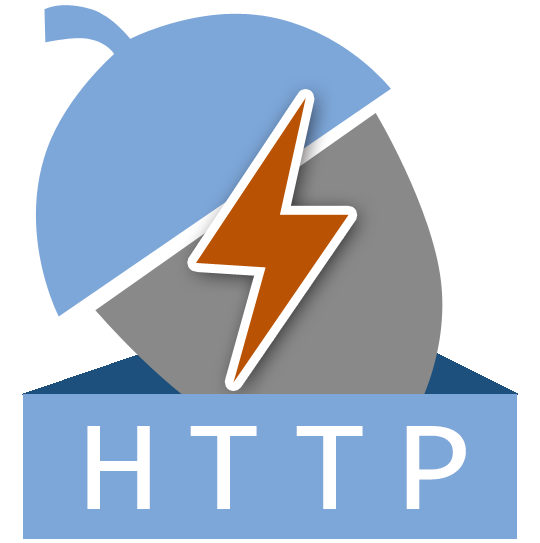
<style>
.page{position:relative;width:540px;height:543px;background:#7da7d9}
.page>*{position:absolute;margin:0}
.t1{font:129.7px "Consolas";letter-spacing:0.2em;color:#ffffff;scale:1.08 1}
</style>
<div class="page">
<p class="t1" style="left:87px;top:426px;width:379px;height:83px">HTTP</p>
</div>
